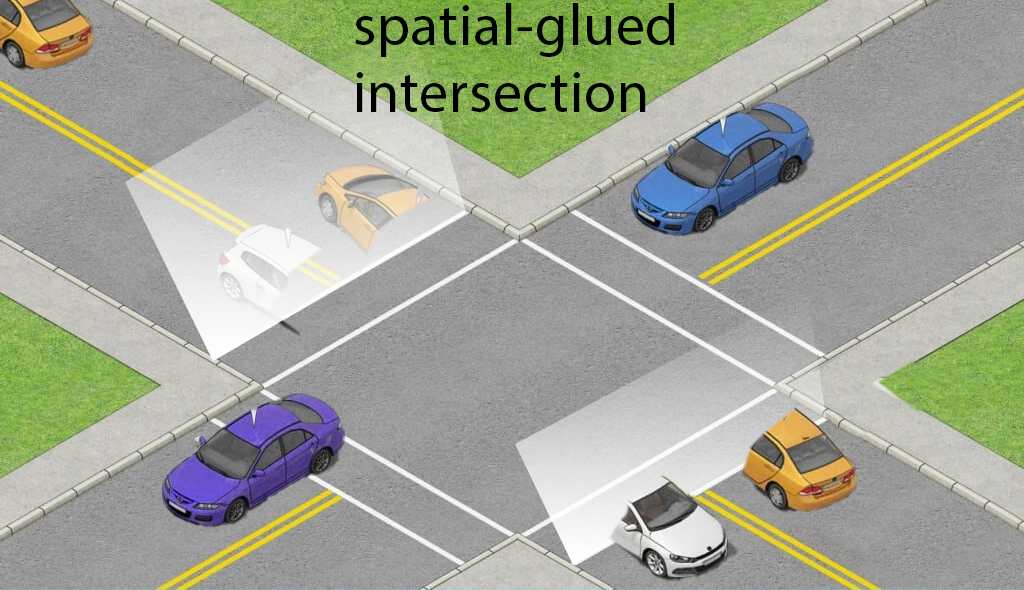
<style>
.page{position:relative;width:1024px;height:590px}
.page>*{position:absolute;margin:0}
.t1{font:58.3px/66.7px "MyriadPro-Regular";letter-spacing:0.01em;color:#000000}
</style>
<div class="page">
<p class="t1" style="left:355px;top:3px;width:320px;height:109px">spatial-glued<br>intersection</p>
</div>
